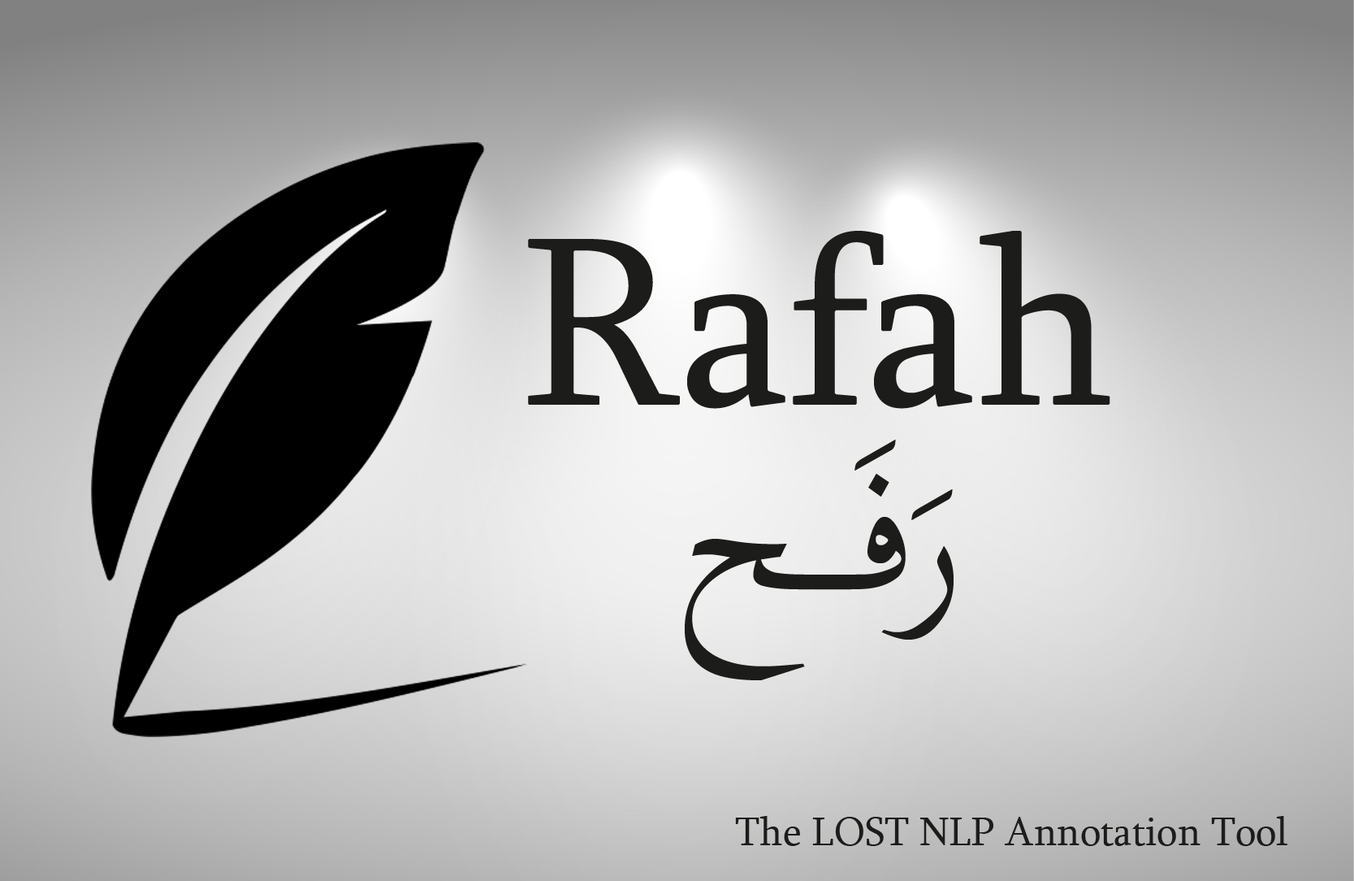
<style>
.page{position:relative;width:1354px;height:881px}
.page>*{position:absolute;margin:0}
.t1{font:246.1px "Sylfaen";color:#1c1c1b}
.t2{font:246.1px "TraditionalArabic";color:#1c1c1b}
.t3{font:40.6px "Sylfaen";color:#1c1c1b}
</style>
<div class="page">
<p class="t1" style="left:528px;top:231px;width:582px;height:178px">Rafah</p>
<p class="t2" style="left:685px;top:439px;width:269px;height:241px">رَفَــــح</p>
<p class="t3" style="left:735px;top:816px;width:553px;height:30px">The LOST NLP Annotation Tool</p>
</div>
